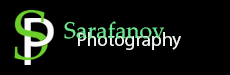
<style>
.page{position:relative;width:230px;height:75px;background:#000000}
.page>*{position:absolute;margin:0}
.t1{font:22.5px "PalatinoLinotype-Roman";color:#6fe791}
.t2{font:19.2px "MyriadPro-Regular";color:#f1f8f3}
</style>
<div class="page">
<p class="t1" style="left:64px;top:21px;width:101px;height:18px">Sarafanov</p>
<p class="t2" style="left:78px;top:32px;width:103px;height:18px">Photography</p>
</div>
